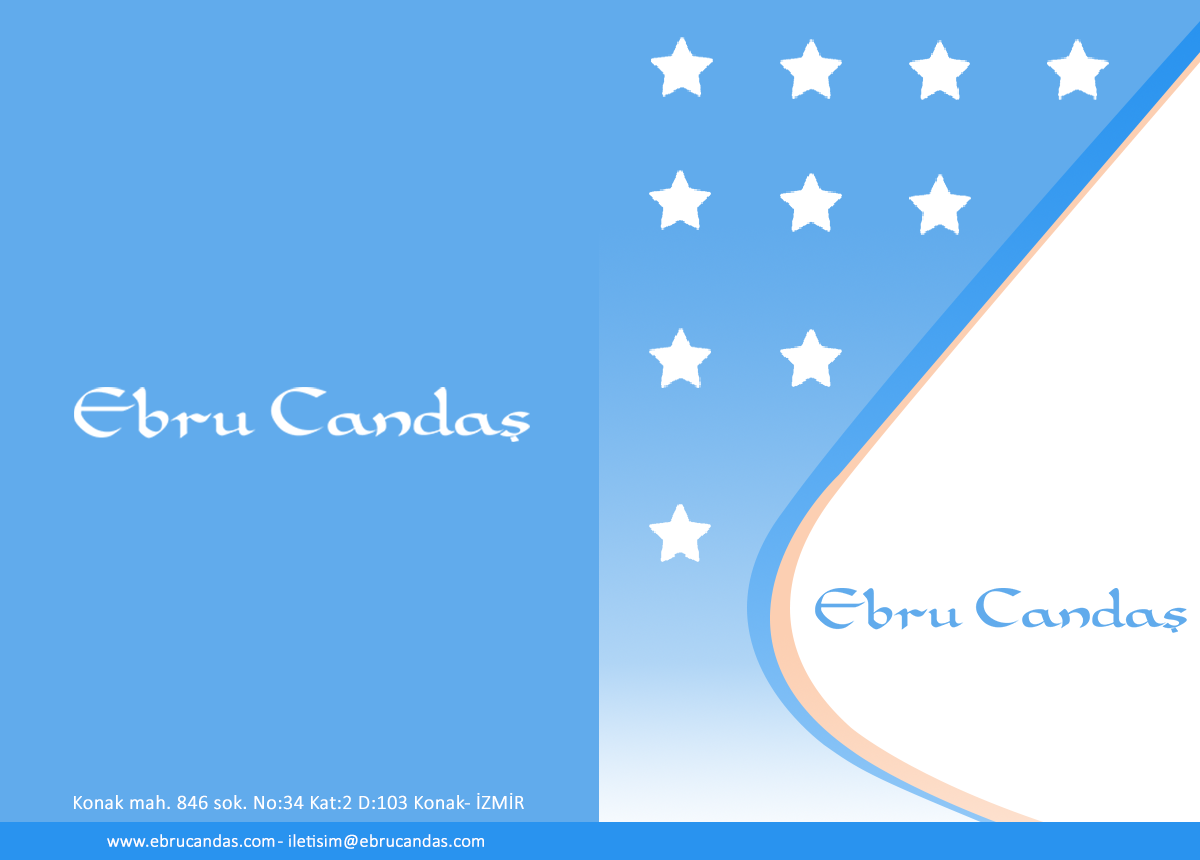
<style>
.page{position:relative;width:1200px;height:860px;background:#61abec}
.page>*{position:absolute;margin:0}
.t1{font:20px "Calibri-Light";color:#ffffff;font-weight:bold}
.t2{font:18px "Calibri-Light";color:#ffffff;font-weight:bold}
</style>
<div class="page">
<p class="t1" style="left:74px;top:793px;width:450px;height:17px">Konak mah. 846 sok. No:34 Kat:2 D:103 Konak- İZMİR</p>
<p class="t2" style="left:107px;top:834px;width:377px;height:15px">www.ebrucandas.com - iletisim@ebrucandas.com</p>
</div>
